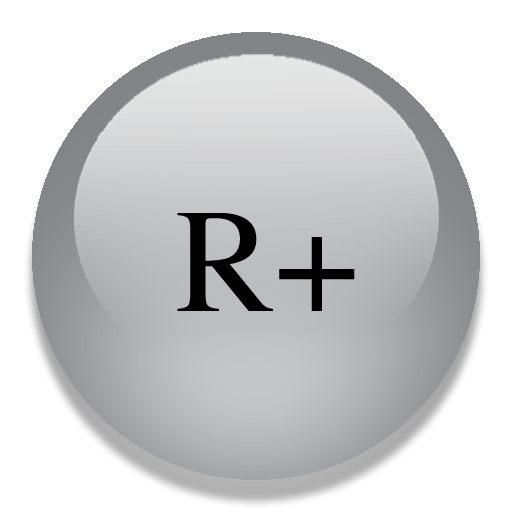
<style>
.page{position:relative;width:512px;height:512px;background:#ffffff}
.page>*{position:absolute;margin:0}
.t1{font:148px "Times-Roman";color:#000000}
</style>
<div class="page">
<p class="t1" style="left:177px;top:213px;width:178px;height:98px">R+</p>
</div>
